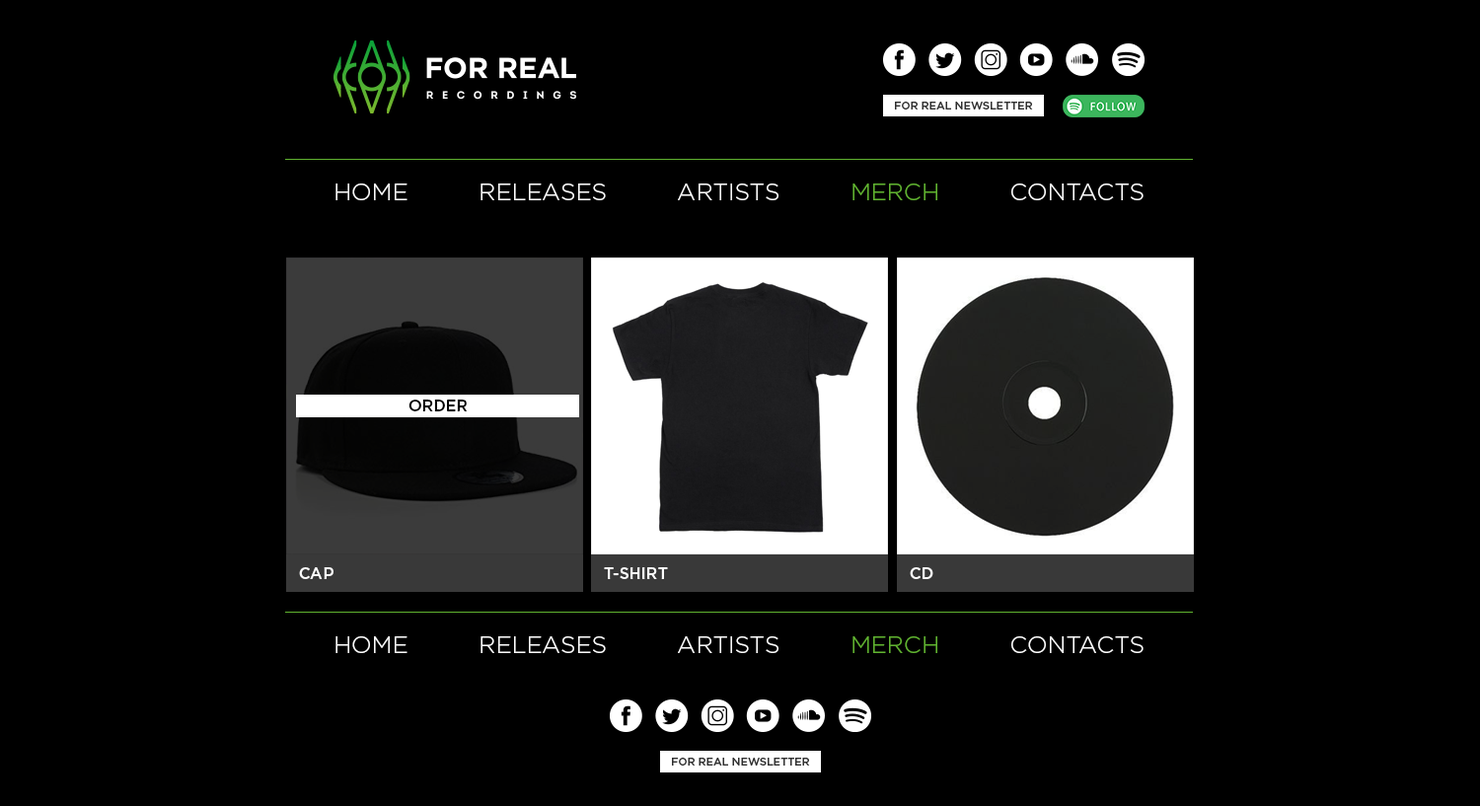
<style>
.page{position:relative;width:1480px;height:806px;background:#000000}
.page>*{position:absolute;margin:0}
.t1{font:10.9px "GothamPro-Medium";letter-spacing:-0.001em;color:#303030;text-transform:uppercase}
.t2{font:23.7px "GothamPro-Light";letter-spacing:-0.001em;color:#ffffff;text-transform:uppercase}
.t3{font:23.7px "GothamPro-Light";letter-spacing:-0.001em;color:#60b330;text-transform:uppercase}
.t4{font:15.8px "GothamPro-Medium";letter-spacing:-0.001em;color:#000000;text-transform:uppercase}
.t5{font:15.8px "GothamPro-Medium";letter-spacing:-0.001em;color:#ffffff;text-transform:uppercase}
</style>
<div class="page">
<p class="t1" style="left:895px;top:102px;width:138px;height:7px">for real NEWSLETTER</p>
<p class="t2" style="left:335px;top:183px;width:808px;height:17px">HOME          RELEASES          ARTISTS          <span class="t3">MERCH</span>          CONTACTS</p>
<p class="t4" style="left:408px;top:399px;width:60px;height:12px">Order</p>
<p class="t5" style="left:299px;top:567px;width:34px;height:12px">cap</p>
<p class="t5" style="left:604px;top:567px;width:64px;height:12px">T-Shirt</p>
<p class="t5" style="left:909px;top:567px;width:24px;height:12px">CD</p>
<p class="t2" style="left:335px;top:636px;width:808px;height:17px">HOME          RELEASES          ARTISTS          <span class="t3">MERCH</span>          CONTACTS</p>
<p class="t1" style="left:672px;top:758px;width:138px;height:7px">for real NEWSLETTER</p>
</div>
